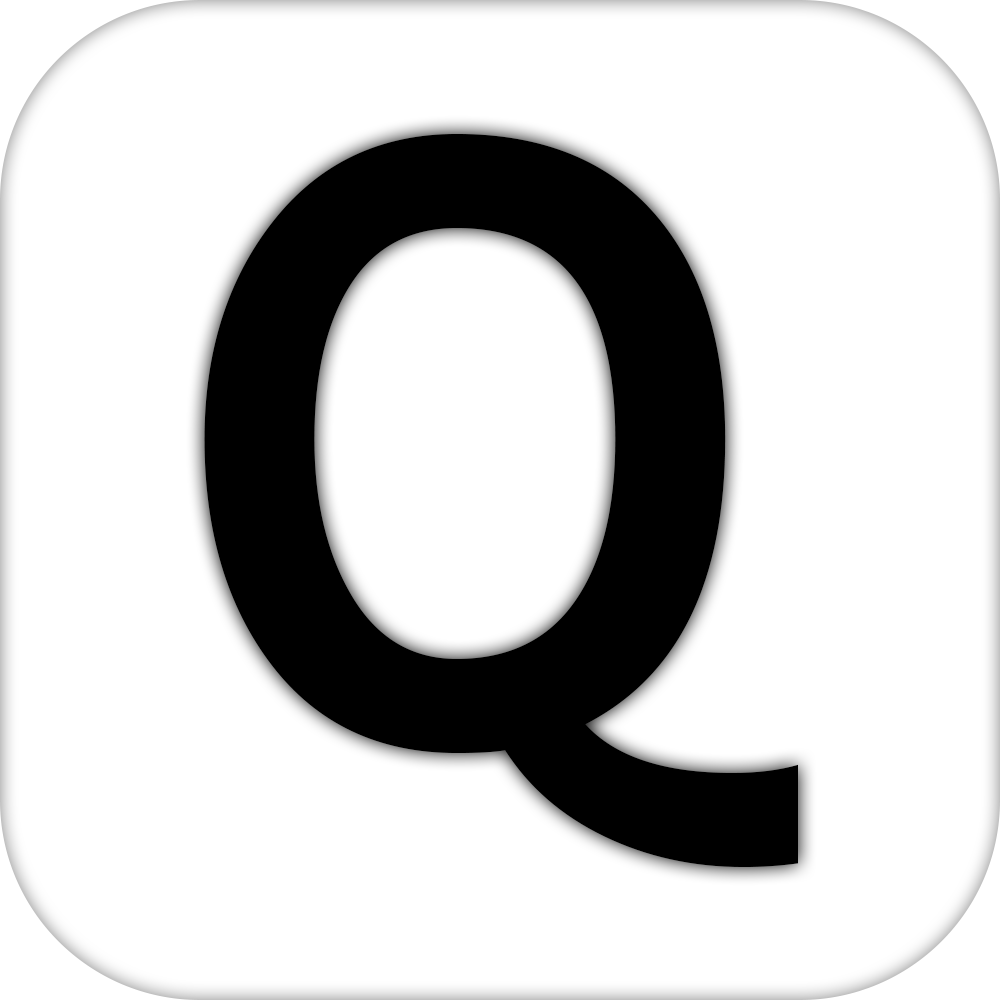
<style>
.page{position:relative;width:1000px;height:1000px;background:#ffffff}
.page>*{position:absolute;margin:0}
.t1{font:833.3px "TrebuchetMS-Bold";color:#000000}
</style>
<div class="page">
<p class="t1" style="left:204px;top:134px;width:594px;height:733px">Q</p>
</div>
